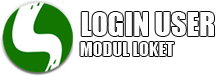
<style>
.page{position:relative;width:220px;height:76px;background:#ffffff}
.page>*{position:absolute;margin:0}
.t1{font:30px "Impact";color:#fefdfd}
.t2{font:18px "Impact";color:#fdfcfc}
</style>
<div class="page">
<p class="t1" style="left:81px;top:12px;width:133px;height:24px">LOGIN USER</p>
<p class="t2" style="left:80px;top:42px;width:94px;height:14px">MODUL LOKET</p>
</div>
